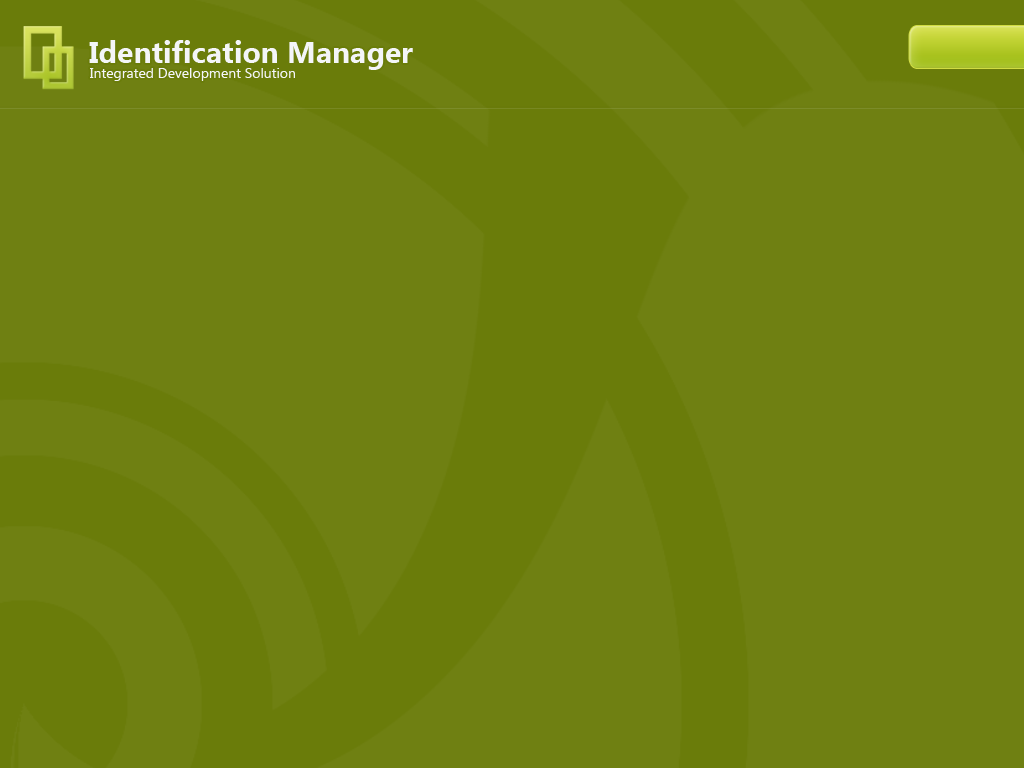
<style>
.page{position:relative;width:1024px;height:768px;background:#6f8012}
.page>*{position:absolute;margin:0}
.t1{font:30px "SegoeUI-Bold";color:#f4f5f8}
.t2{font:14px "SegoeUI";color:#f4f5f8}
</style>
<div class="page">
<p class="t1" style="left:89px;top:40px;width:324px;height:30px">Identification Manager</p>
<p class="t2" style="left:90px;top:68px;width:205px;height:13px">Integrated Development Solution</p>
</div>
